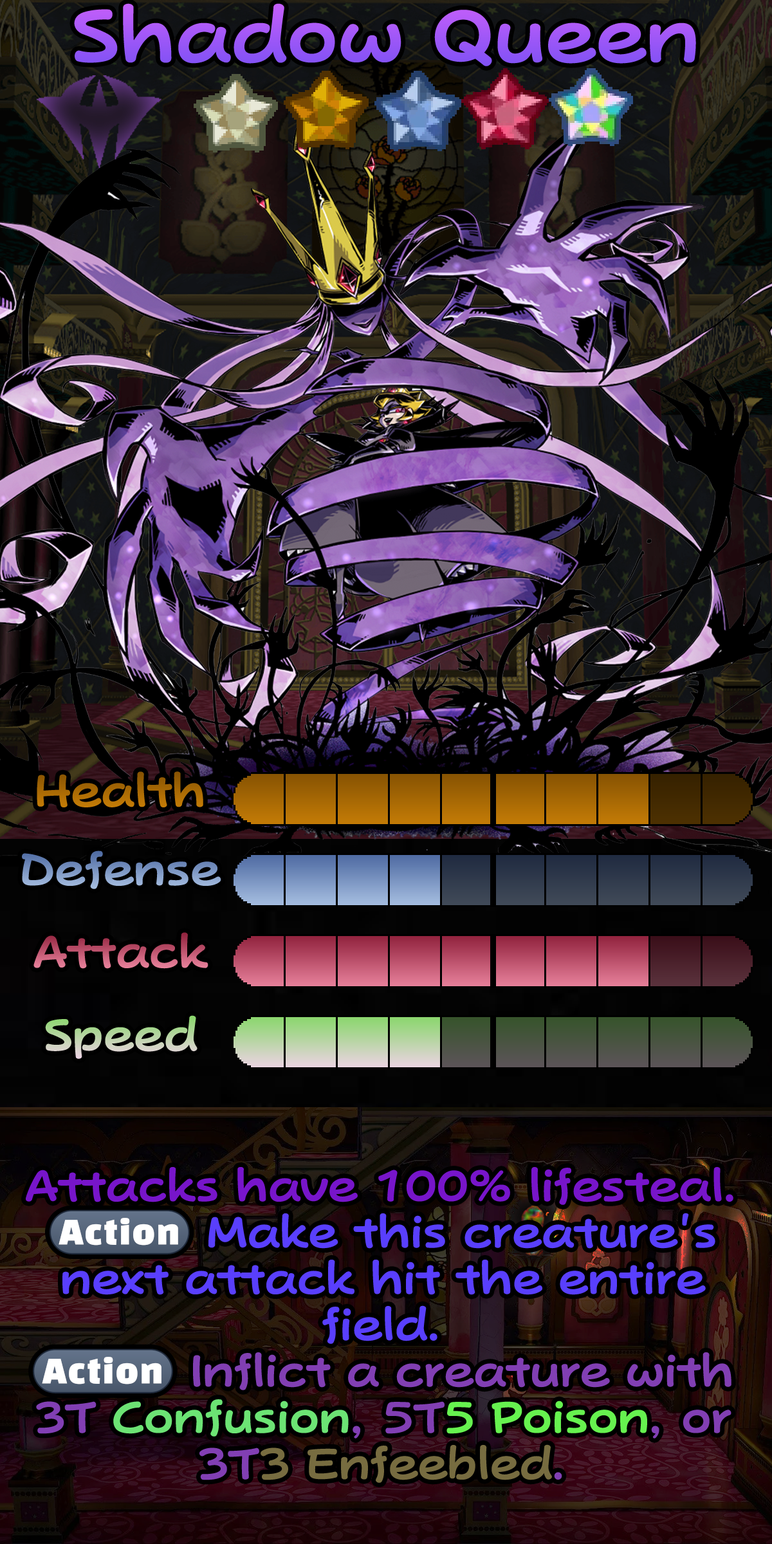
<style>
.page{position:relative;width:772px;height:1544px}
.page>*{position:absolute;margin:0}
.t1{font:128.7px "PopJoyStd-B";color:#9956f7}
.t2{font:77.2px "PopJoyStd-B";color:#ac6c05}
.t3{font:77.2px "PopJoyStd-B"}
.t4{font:75.3px/46.3px "PopJoyStd-B";color:#593ffd}
.t5{font:75.3px/46.3px "PopJoyStd-B";color:#7715ca}
.t6{font:78px/46.3px "stoogedings-Regular";color:#593ffd}
.t7{font:78px/46.3px "stoogedings-Regular";color:#813fb3}
.t8{font:75.3px/46.3px "PopJoyStd-B";color:#813fb3}
.t9{font:75.3px/46.3px "PopJoyStd-B";color:#6ce374}
.t10{font:75.3px/46.3px "PopJoyStd-B";color:#66f24f}
.t11{font:75.3px/46.3px "PopJoyStd-B";color:#776c40}
</style>
<div class="page">
<p class="t1" style="left:74px;top:3px;width:622px;height:63px">Shadow Queen</p>
<p class="t2" style="left:37px;top:772px;width:166px;height:36px">Health</p>
<p class="t3" style="left:22px;top:851px;width:199px;height:38px">Defense</p>
<p class="t3" style="left:33px;top:932px;width:175px;height:37px">Attack</p>
<p class="t3" style="left:45px;top:1015px;width:153px;height:44px">Speed</p>
<p class="t4" style="left:26px;top:1167px;width:708px;height:316px;text-align:center"><span class="t5">Attacks have 100% lifesteal. <br></span><span class="t6">(Action)</span> Make this creature's next attack hit the entire field.<br><span class="t7">(Action)</span><span class="t8"> Inflict a creature with 3T </span><span class="t9">Confusion</span><span class="t8">, 5T</span><span class="t10">5 Poison</span><span class="t8">, or 3T</span><span class="t11">3 Enfeebled</span><span class="t8">.</span></p>
</div>
